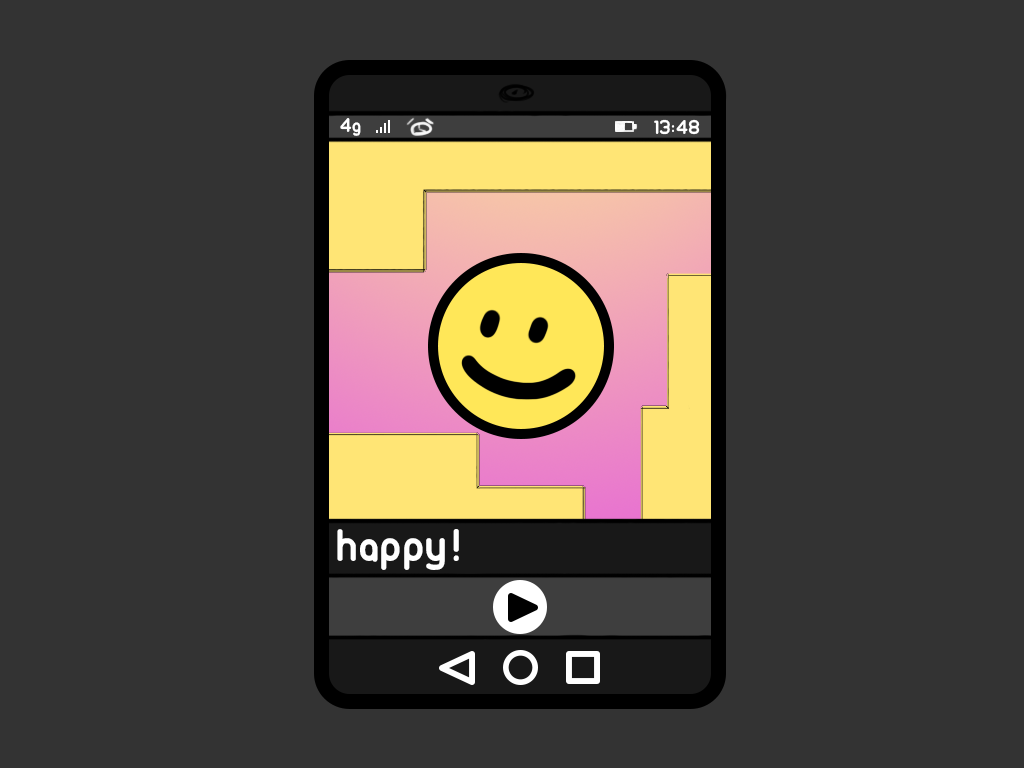
<style>
.page{position:relative;width:1024px;height:768px;background:#333333}
.page>*{position:absolute;margin:0}
.t1{font:20px "Ubuntu-Title";color:#ffffff}
.t2{font:48px "Ubuntu-Title";color:#ffffff}
</style>
<div class="page">
<p class="t1" style="left:340px;top:118px;width:21px;height:18px">4g</p>
<p class="t1" style="left:654px;top:119px;width:46px;height:16px">13:48</p>
<p class="t2" style="left:337px;top:529px;width:122px;height:41px">happy!</p>
</div>
